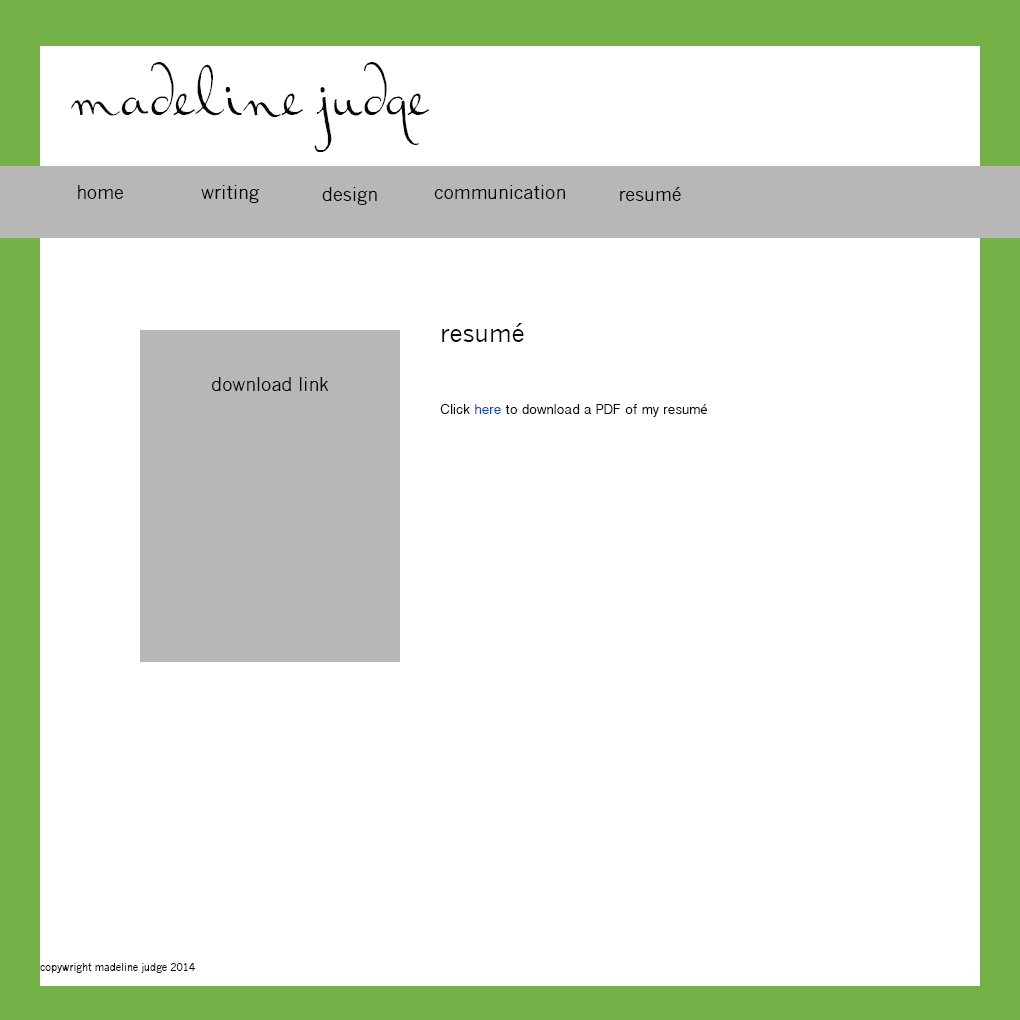
<style>
.page{position:relative;width:1020px;height:1020px;background:#ffffff}
.page>*{position:absolute;margin:0}
.t1{font:72px "RalphWalker";color:#070808}
.t2{font:18px "NewsGothicMT";color:#070808}
.t3{font:14px/24px "BanglaSangamMN";color:#070808}
.t4{font:24px/24px "NewsGothicMT";color:#070808}
.t5{font:14px/24px "BanglaSangamMN";color:#0848da}
.t6{font:14px/24px "MyriadPro-Regular";color:#070808}
.t7{font:10px "NewsGothicMT";color:#070808}
</style>
<div class="page">
<p class="t1" style="left:71px;top:62px;width:358px;height:90px">madeline judge</p>
<p class="t2" style="left:78px;top:185px;width:45px;height:14px">home</p>
<p class="t2" style="left:201px;top:185px;width:58px;height:18px">writing</p>
<p class="t2" style="left:434px;top:185px;width:131px;height:14px">communication</p>
<p class="t2" style="left:322px;top:187px;width:55px;height:18px">design</p>
<p class="t2" style="left:620px;top:187px;width:61px;height:14px">resumé</p>
<p class="t3" style="left:440px;top:323px;width:267px;height:94px"><span class="t4">resumé<br><br></span><br>Click <span class="t5">here</span> to download a PDF of my resum<span class="t6">é</span></p>
<p class="t2" style="left:212px;top:377px;width:117px;height:14px">download link</p>
<p class="t7" style="left:40px;top:963px;width:156px;height:10px">copywright madeline judge 2014</p>
</div>
